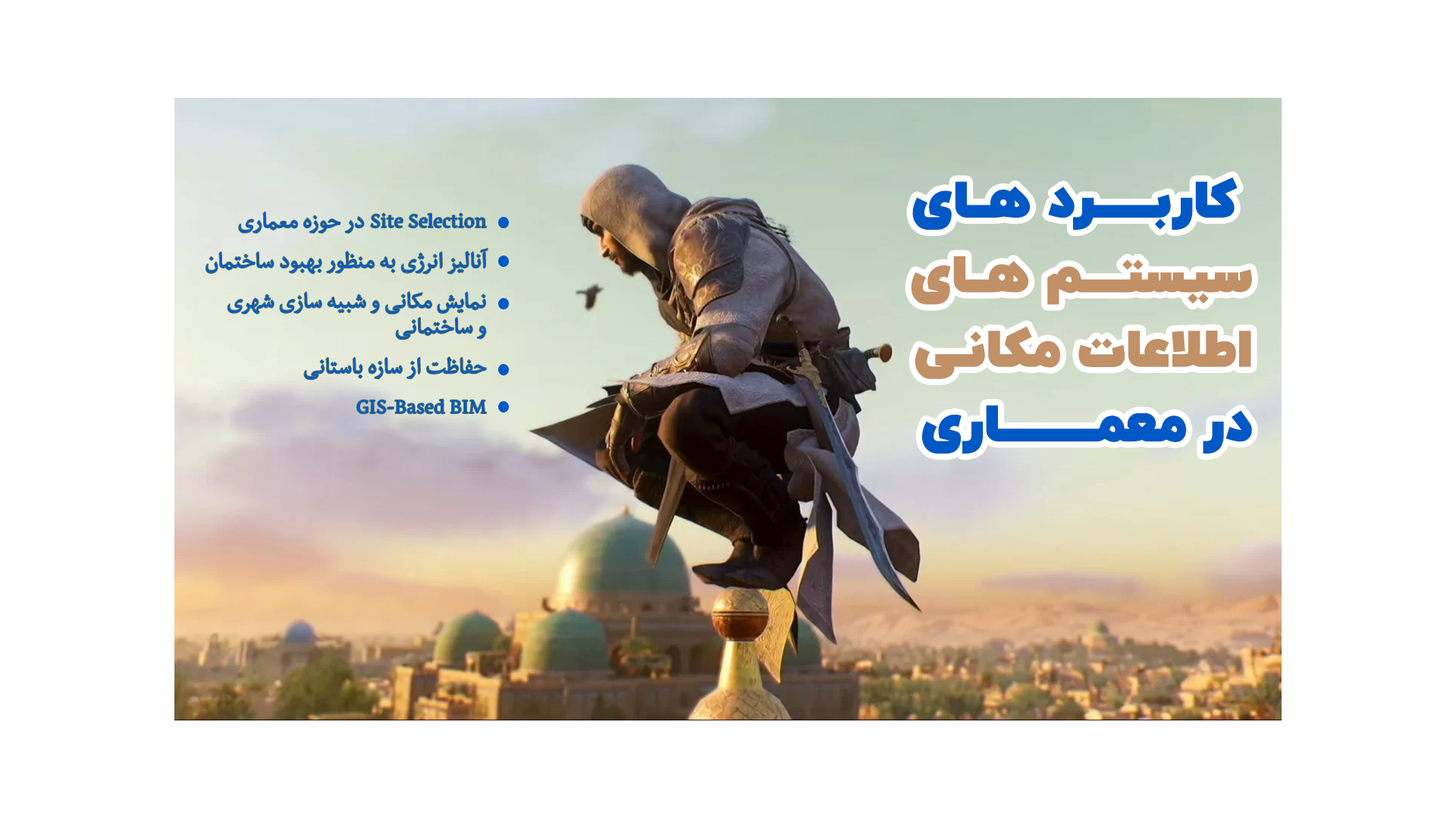
<style>
.page{position:relative;width:1456px;height:819px;background:#ffffff}
.page>*{position:absolute;margin:0}
.t1{font:49.7px/74.6px "IRANYekan-ExtraBlack";color:#c19066}
.t2{font:49.7px/74.6px "IRANYekan-ExtraBlack";color:#0058c5}
.t3{font:25.5px/40.1px "BBCNassim";color:#0058c5}
.t4{font:24.3px/40.1px "BBCNassim";color:#0058c5}
.t5{font:25.5px/25.5px "BBCNassim";color:#0058c5}
</style>
<div class="page">
<p class="t1" style="left:911px;top:177px;width:341px;height:277px;text-align:right"><span class="t2">کاربــــــرد هــای <br></span>سیستــــم هــای<br> اطلاعات مکانـی<br><span class="t2"> در معمــــــــــاری</span></p>
<p class="t3" style="left:206px;top:212px;width:282px;height:202px;text-align:right">در حوزه معماری <span class="t4">Site Selection<br></span>آنالیز انرژی به منظور بهبود ساختمان<br>نمایش مکانی و شبیه سازی شهری<br><span class="t5"> و ساختمانی<br></span>حفاظت از سازه باستانی<br><span class="t4">GIS-Based BIM</span></p>
</div>
